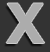
<style>
.page{position:relative;width:50px;height:52px;background:#333333}
.page>*{position:absolute;margin:0}
.t1{font:55px "HelveticaNeue-Bold";color:#acacac}
</style>
<div class="page">
<p class="t1" style="left:6px;top:3px;width:39px;height:40px">X</p>
</div>
